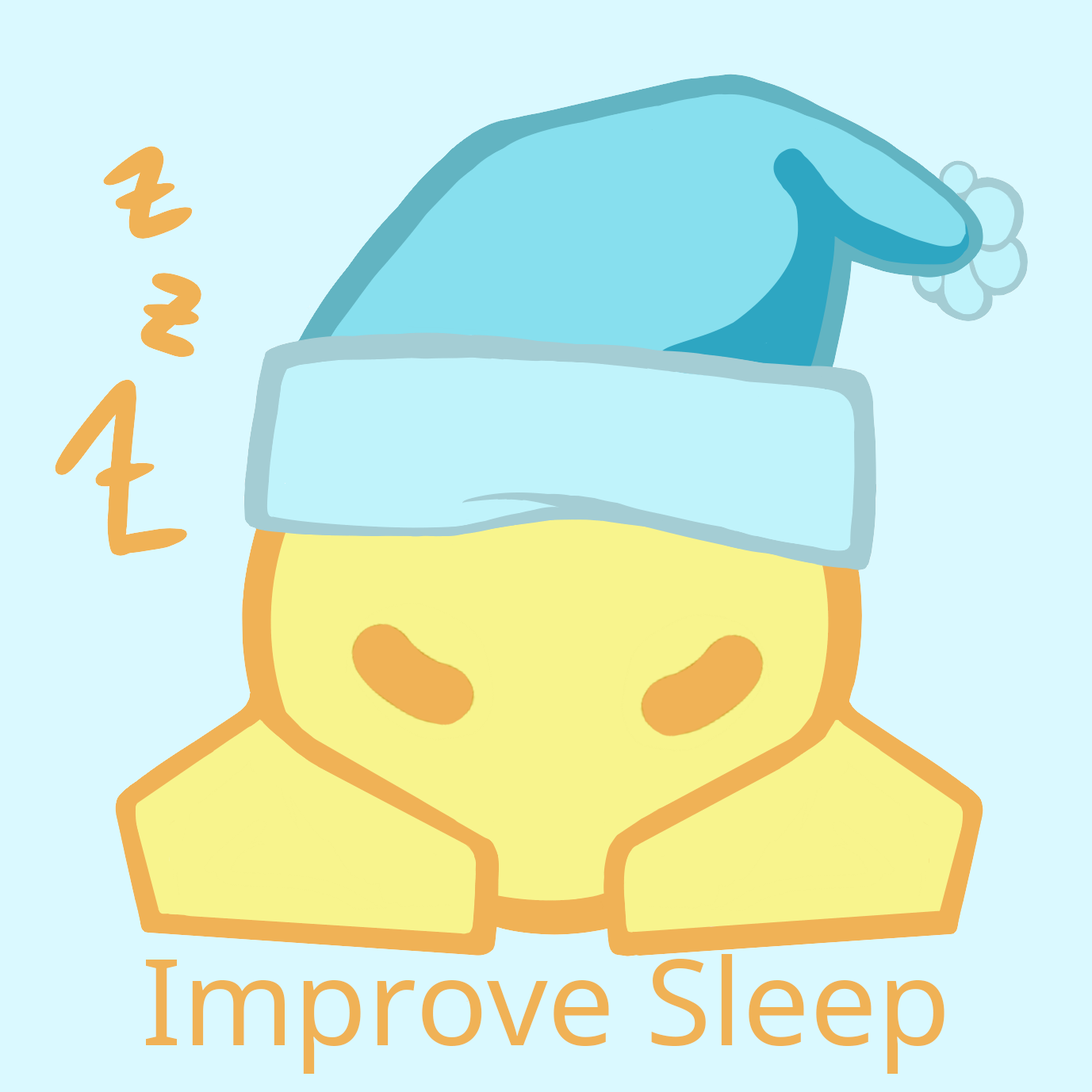
<style>
.page{position:relative;width:1092px;height:1092px;background:#daf9ff}
.page>*{position:absolute;margin:0}
.t1{font:119.5px "NotoSans";color:#f0b256}
</style>
<div class="page">
<p class="t1" style="left:146px;top:954px;width:798px;height:120px">Improve Sleep</p>
</div>
